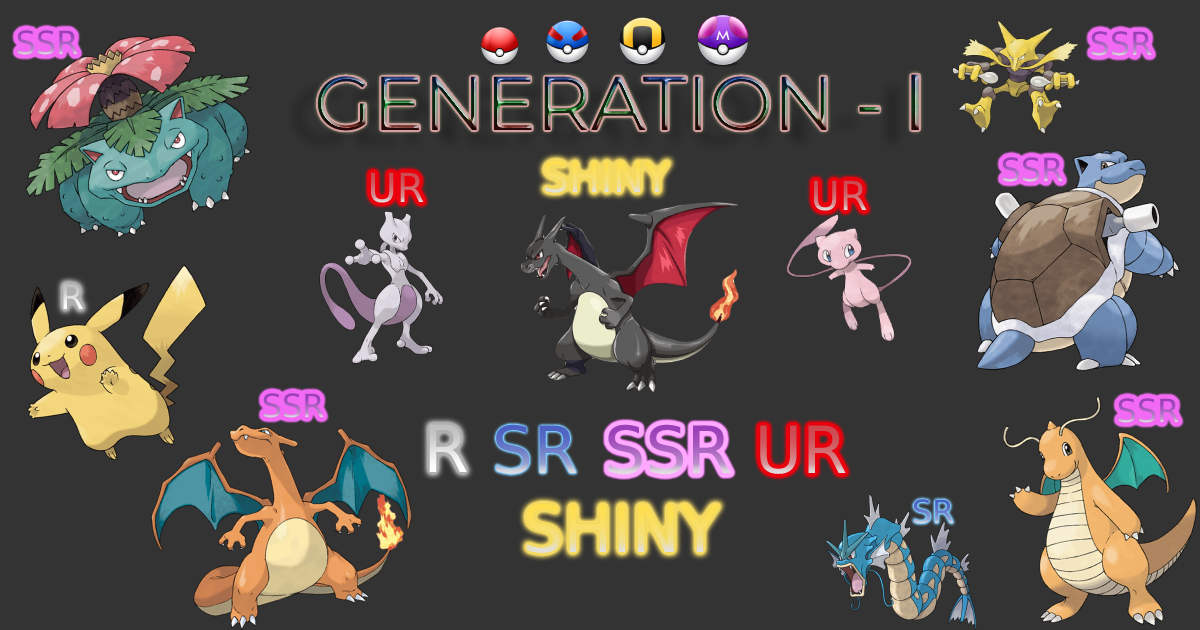
<style>
.page{position:relative;width:1200px;height:630px;background:#333333}
.page>*{position:absolute;margin:0}
.t1{font:32px "DejaVuSans"}
.t2{font:42px "DejaVuSans"}
.t3{font:40px "DejaVuSans"}
.t4{font:65px "DejaVuSans"}
</style>
<div class="page">
<p class="t1" style="left:17px;top:30px;width:61px;height:25px">SSR</p>
<p class="t1" style="left:1091px;top:31px;width:61px;height:25px">SSR</p>
<p class="t2" style="left:544px;top:160px;width:126px;height:33px">SHINY</p>
<p class="t1" style="left:1002px;top:157px;width:61px;height:25px">SSR</p>
<p class="t3" style="left:370px;top:172px;width:54px;height:31px">UR</p>
<p class="t3" style="left:813px;top:180px;width:54px;height:31px">UR</p>
<p class="t1" style="left:263px;top:393px;width:61px;height:25px">SSR</p>
<p class="t1" style="left:1118px;top:398px;width:61px;height:25px">SSR</p>
<p class="t4" style="left:496px;top:424px;width:81px;height:50px">SR</p>
<p class="t4" style="left:760px;top:425px;width:86px;height:49px">UR</p>
<p class="t4" style="left:526px;top:503px;width:194px;height:50px">SHINY</p>
<p class="t1" style="left:913px;top:499px;width:41px;height:25px">SR</p>
</div>
